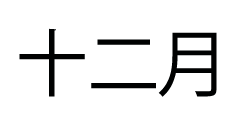
<style>
.page{position:relative;width:240px;height:120px;background:#ffffff}
.page>*{position:absolute;margin:0}
.t1{font:72.6px "KozGoPr6N-Regular";color:#000101}
</style>
<div class="page">
<p class="t1" style="left:19px;top:28px;width:198px;height:69px">十二月</p>
</div>
